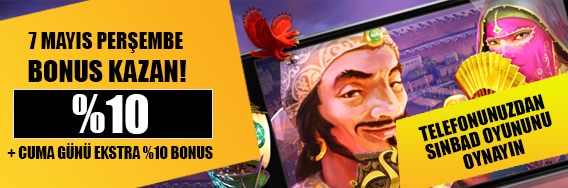
<style>
.page{position:relative;width:568px;height:188px}
.page>*{position:absolute;margin:0}
.t1{font:21.3px "Impact";color:#000000;text-transform:uppercase}
.t2{font:27.8px "Impact";color:#000000;text-transform:uppercase}
.t3{font:48.2px "Impact";color:#ffffff;text-transform:uppercase}
.t4{font:18.9px/16.4px "Impact";color:#000000;text-transform:uppercase}
.t5{font:15.6px "Impact";color:#000000;text-transform:uppercase}
</style>
<div class="page">
<p class="t1" style="left:28px;top:32px;width:155px;height:21px">7 MAYIS perŞEMBE</p>
<p class="t2" style="left:28px;top:60px;width:158px;height:22px">BONUS KAZAN!</p>
<p class="t3" style="left:72px;top:94px;width:76px;height:40px">%10</p>
<p class="t4" style="left:418px;top:94px;width:134px;height:76px;text-align:center;rotate:-15deg">telefonunuzdan <br>sınbad oyununu<br>oynayın</p>
<p class="t5" style="left:7px;top:143px;width:206px;height:16px">+ CUMA GüNü EKSTRA %10 BONUS</p>
</div>
